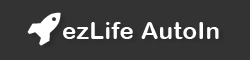
<style>
.page{position:relative;width:250px;height:60px;background:#333333}
.page>*{position:absolute;margin:0}
.t1{font:24px "ArialRoundedMTBold";letter-spacing:0.02em;color:#ffffff}
</style>
<div class="page">
<p class="t1" style="left:63px;top:22px;width:156px;height:17px">ezLife AutoIn</p>
</div>
